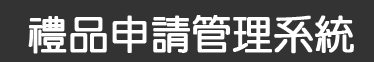
<style>
.page{position:relative;width:374px;height:62px;background:#333333}
.page>*{position:absolute;margin:0}
.t1{font:40px "DFYuan-W5-WIN-BF";color:#ffffff;font-weight:bold}
</style>
<div class="page">
<p class="t1" style="left:28px;top:15px;width:326px;height:39px">禮品申請管理系統</p>
</div>
